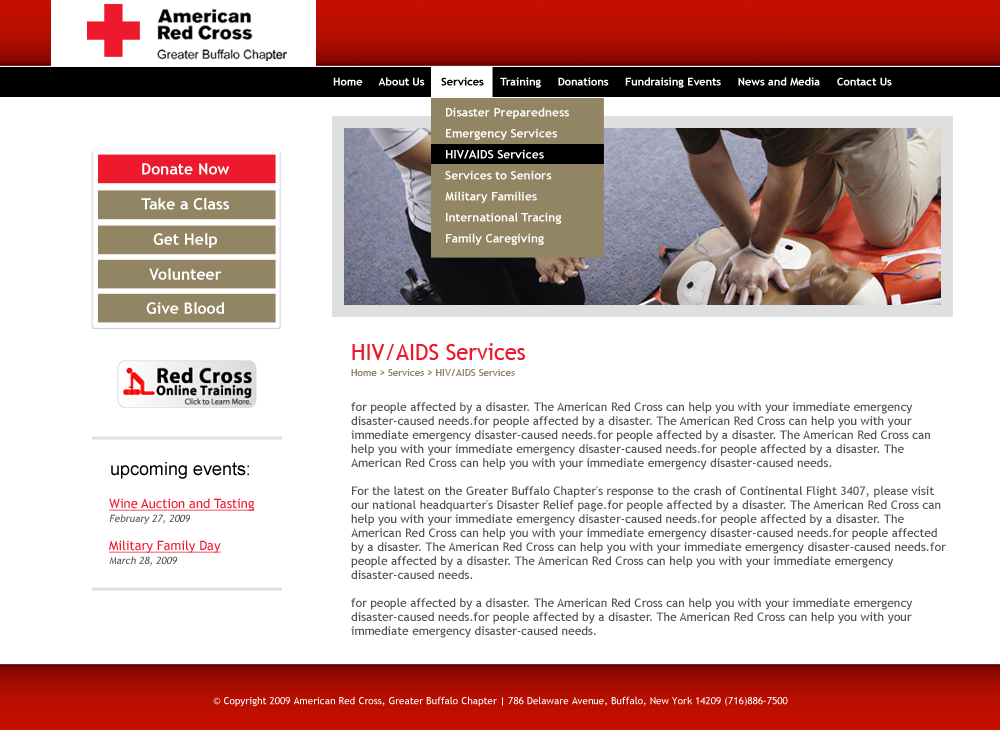
<style>
.page{position:relative;width:1000px;height:730px;background:#ffffff}
.page>*{position:absolute;margin:0}
.t1{font:11px "TrebuchetMS-Bold";color:#ffffff}
.t2{font:11px "TrebuchetMS-Bold";color:#000000}
.t3{font:12px/21px "TrebuchetMS-Bold";color:#ffffff}
.t4{font:15.8px/35.1px "TrebuchetMS-Bold";color:#ffffff}
.t5{font:15.8px/34px "TrebuchetMS-Bold";color:#ffffff}
.t6{font:10px/16px "TrebuchetMS";color:#928564}
.t7{font:22px/16px "TrebuchetMS";color:#ed1a2d}
.t8{font:12px/14px "TrebuchetMS";color:#525252}
.t9{font:18px "ArialMT";color:#000000}
.t10{font:13px/14px "TrebuchetMS";color:#ed1a2d;text-decoration:underline}
.t11{font:10px/14px "TrebuchetMS";color:#525252;font-style:italic}
.t12{font:10px "TrebuchetMS";color:#ffffff}
</style>
<div class="page">
<p class="t1" style="left:333px;top:77px;width:559px;height:11px">Home     About Us   <span class="t2">  Services   </span>  Training     Donations     Fundraising Events     News and Media     Contact Us</p>
<p class="t3" style="left:445px;top:107px;width:124px;height:138px">Disaster Preparedness    <br>Emergency Services    <br>HIV/AIDS Services       <br>Services to Seniors <br>Military Families <br>International Tracing   <br>Family Caregiving</p>
<p class="t4" style="left:141px;top:163px;width:89px;height:151px;text-align:center">Donate Now<br>Take a Class<br>Get Help<br>Volunteer<br><span class="t5">Give Blood</span></p>
<p class="t6" style="left:351px;top:343px;width:174px;height:33px"><span class="t7">HIV/AIDS Services<br></span>Home &gt; Services &gt; HIV/AIDS Services</p>
<p class="t8" style="left:351px;top:402px;width:595px;height:236px">for people affected by a disaster. The American Red Cross can help you with your immediate emergency disaster-caused needs.for people affected by a disaster. The American Red Cross can help you with your immediate emergency disaster-caused needs.for people affected by a disaster. The American Red Cross can help you with your immediate emergency disaster-caused needs.for people affected by a disaster. The American Red Cross can help you with your immediate emergency disaster-caused needs.<br><br>For the latest on the Greater Buffalo Chapter's response to the crash of Continental Flight 3407, please visit our national headquarter's Disaster Relief page.for people affected by a disaster. The American Red Cross can help you with your immediate emergency disaster-caused needs.for people affected by a disaster. The American Red Cross can help you with your immediate emergency disaster-caused needs.for people affected by a disaster. The American Red Cross can help you with your immediate emergency disaster-caused needs.for people affected by a disaster. The American Red Cross can help you with your immediate emergency disaster-caused needs.<br><br>for people affected by a disaster. The American Red Cross can help you with your immediate emergency disaster-caused needs.for people affected by a disaster. The American Red Cross can help you with your immediate emergency disaster-caused needs.</p>
<p class="t9" style="left:111px;top:462px;width:138px;height:17px">upcoming events:</p>
<p class="t10" style="left:109px;top:498px;width:146px;height:68px">Wine Auction and Tasting<br><span class="t11">February 27, 2009<br><br></span>Military Family Day<br><span class="t11">March 28, 2009</span></p>
<p class="t12" style="left:213px;top:696px;width:575px;height:11px">© Copyright 2009 American Red Cross, Greater Buffalo Chapter | 786 Delaware Avenue, Buffalo, New York 14209 (716)886-7500</p>
</div>
